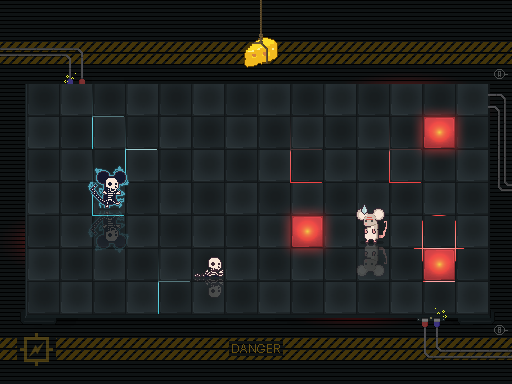
<style>
.page{position:relative;width:512px;height:384px;background:#0f1314}
.page>*{position:absolute;margin:0}
.t1{font:12px "Gravity-Regular";color:#6d5617}
</style>
<div class="page">
<p class="t1" style="left:232px;top:344px;width:48px;height:9px">DANGER</p>
</div>
